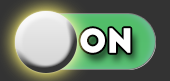
<style>
.page{position:relative;width:170px;height:81px;background:#333333}
.page>*{position:absolute;margin:0}
.t1{font:32.5px "BigJohn";color:#ffffff}
</style>
<div class="page">
<p class="t1" style="left:80px;top:28px;width:51px;height:25px">on</p>
</div>
